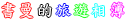
<style>
.page{position:relative;width:125px;height:20px;background:#ffffff}
.page>*{position:absolute;margin:0}
.t1{font:16px "DFKaiShu-SB-Estd-BF";color:#ffffff}
</style>
<div class="page">
<p class="t1" style="left:38px;top:4px;width:14px;height:13px">的</p>
<p class="t1" style="left:56px;top:4px;width:15px;height:12px">旅</p>
<p class="t1" style="left:91px;top:4px;width:14px;height:13px">相</p>
<p class="t1" style="left:110px;top:2px;width:14px;height:16px">簿</p>
</div>
